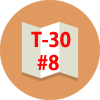
<style>
.page{position:relative;width:100px;height:100px;background:#e0995e}
.page>*{position:absolute;margin:0}
.t1{font:19.6px "AdobeGothicStd-Bold";color:#fc0606}
</style>
<div class="page">
<p class="t1" style="left:31px;top:31px;width:40px;height:17px">T-30</p>
<p class="t1" style="left:37px;top:54px;width:22px;height:17px">#8</p>
</div>
